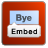
<style>
.page{position:relative;width:48px;height:48px}
.page>*{position:absolute;margin:0}
.t1{font:8.8px "HelveticaNeue-Bold";letter-spacing:0.025em;color:#4b525b}
.t2{font:7.1px "HelveticaNeue";letter-spacing:0.12em;color:#000000}
</style>
<div class="page">
<p class="t1" style="left:16px;top:14px;width:16px;height:9px">Bye</p>
<p class="t2" style="left:11px;top:28px;width:26px;height:7px">Embed</p>
</div>
